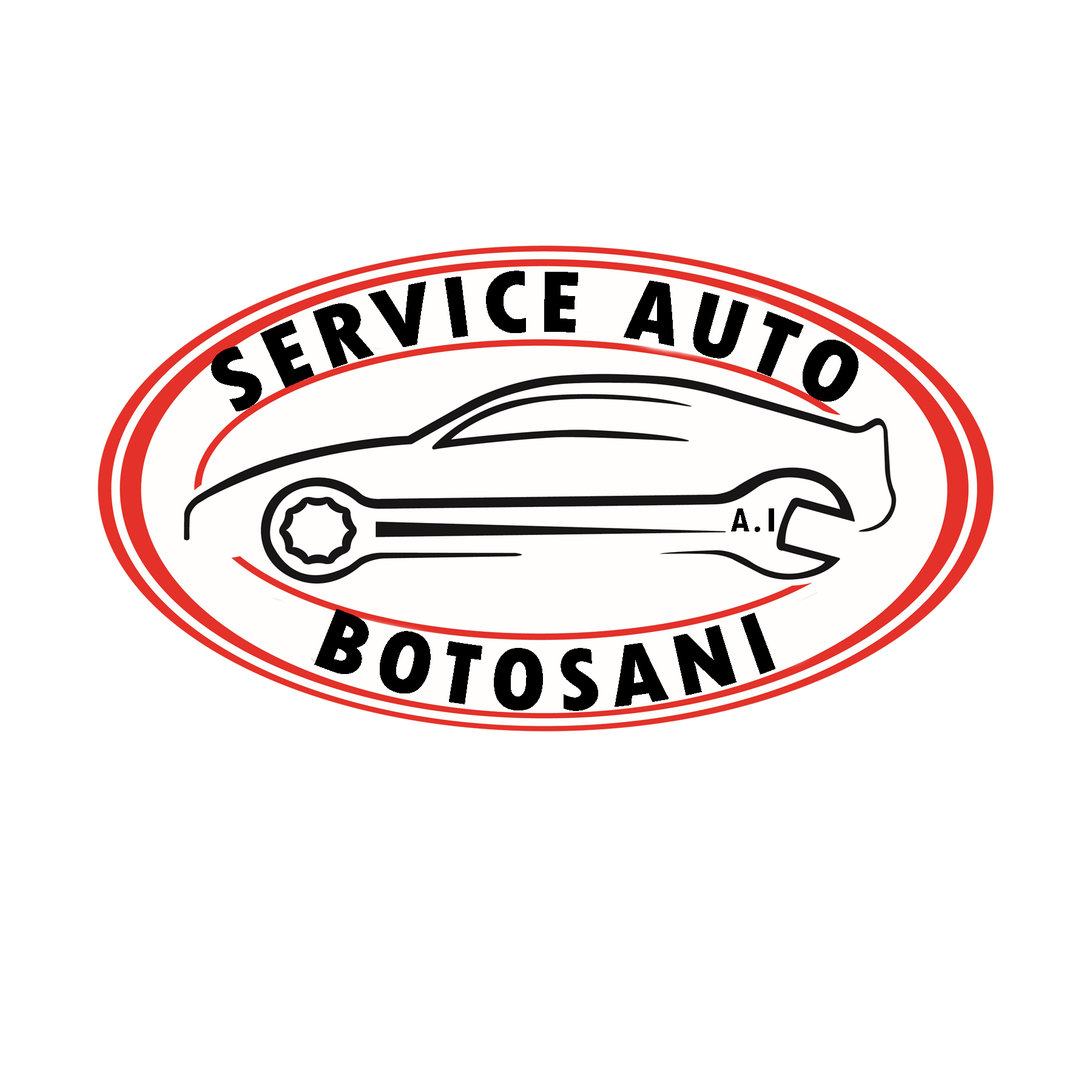
<style>
.page{position:relative;width:1092px;height:1092px;background:#ffffff}
.page>*{position:absolute;margin:0}
.t1{font:91px "TwCenMT-CondensedExtraBold";letter-spacing:0.1em;color:#000000;text-transform:uppercase}
.t2{font:35.4px "TwCenMT-CondensedExtraBold";letter-spacing:0.1em;color:#000000;text-transform:uppercase}
</style>
<div class="page">
<p class="t1" style="left:211px;top:271px;width:647px;height:140px">service auto</p>
<p class="t2" style="left:731px;top:508px;width:43px;height:24px">a.i</p>
<p class="t1" style="left:314px;top:609px;width:461px;height:102px">botosani</p>
</div>
